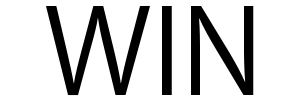
<style>
.page{position:relative;width:300px;height:100px;background:#ffffff}
.page>*{position:absolute;margin:0}
.t1{font:116.7px "KozGoPr6N-Regular";color:#000000}
</style>
<div class="page">
<p class="t1" style="left:46px;top:5px;width:208px;height:91px">WIN</p>
</div>
